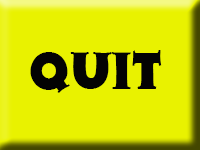
<style>
.page{position:relative;width:200px;height:150px;background:#e9f200}
.page>*{position:absolute;margin:0}
.t1{font:50px "Colbert";color:#030303}
</style>
<div class="page">
<p class="t1" style="left:30px;top:50px;width:132px;height:43px">QUIT</p>
</div>
